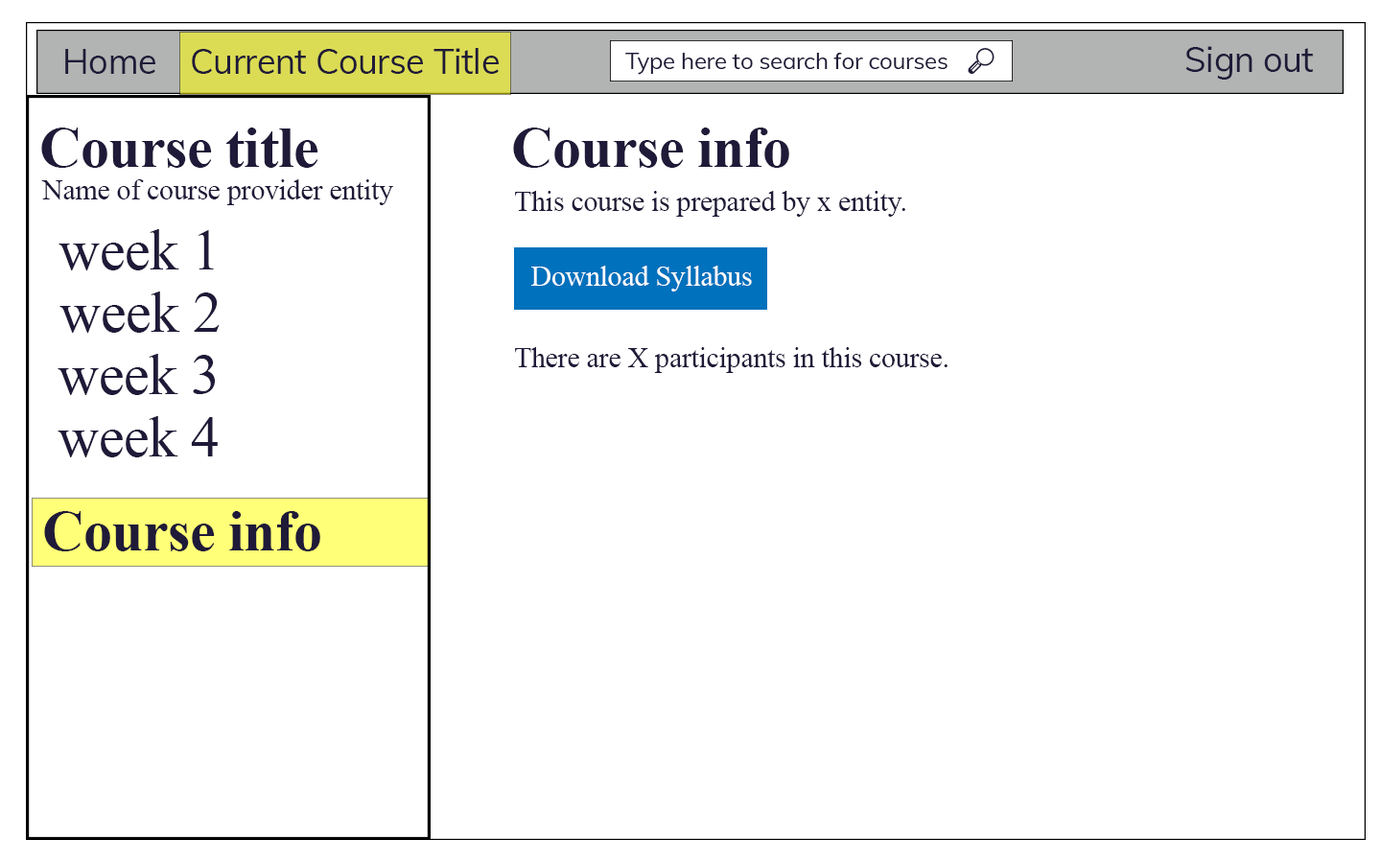
<style>
.page{position:relative;width:1381px;height:863px;background:#ffffff}
.page>*{position:absolute;margin:0}
.t1{font:34.5px "Muli-Regular";letter-spacing:-0.01em;color:#1f1a38}
.t2{font:23px "Muli-Regular";letter-spacing:-0.01em;color:#1f1a38}
.t3{font:23px "SegoeUIEmoji";letter-spacing:-0.01em;color:#1f1a38}
.t4{font:57.6px "TimesNewRomanPS-BoldMT";letter-spacing:-0.01em;color:#1f1a38}
.t5{font:28.8px "TimesNewRomanPSMT";letter-spacing:-0.01em;color:#1f1a38}
.t6{font:57.6px "TimesNewRomanPSMT";letter-spacing:-0.01em;color:#1f1a38}
</style>
<div class="page">
<p class="t1" style="left:65px;top:49px;width:90px;height:25px">Home</p>
<p class="t1" style="left:192px;top:48px;width:307px;height:26px">Current Course Title</p>
<p class="t2" style="left:625px;top:47px;width:370px;height:28px">Type here to search for courses   <span class="t3">🔎</span></p>
<p class="t1" style="left:1186px;top:46px;width:127px;height:34px">Sign out</p>
<p class="t4" style="left:41px;top:128px;width:277px;height:40px">Course title</p>
<p class="t4" style="left:513px;top:128px;width:276px;height:40px">Course info</p>
<p class="t5" style="left:41px;top:179px;width:352px;height:26px">Name of course provider entity</p>
<p class="t5" style="left:515px;top:191px;width:390px;height:26px">This course is prepared by x entity.</p>
<p class="t6" style="left:59px;top:229px;width:155px;height:41px">week 1</p>
<p class="t6" style="left:59px;top:292px;width:161px;height:41px">week 2</p>
<p class="t6" style="left:58px;top:354px;width:157px;height:41px">week 3</p>
<p class="t5" style="left:515px;top:347px;width:433px;height:26px">There are X participants in this course.</p>
<p class="t6" style="left:58px;top:416px;width:160px;height:42px">week 4</p>
<p class="t4" style="left:44px;top:511px;width:276px;height:41px">Course info</p>
</div>
